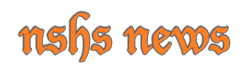
<style>
.page{position:relative;width:250px;height:75px;background:#ffffff}
.page>*{position:absolute;margin:0}
.t1{font:48px "LucidaBlackletter";color:#ff7f20}
</style>
<div class="page">
<p class="t1" style="left:19px;top:12px;width:211px;height:50px">nshs news</p>
</div>
